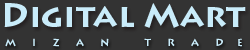
<style>
.page{position:relative;width:250px;height:50px;background:#333333}
.page>*{position:absolute;margin:0}
.t1{font:33px "LithosPro-Bold";color:#c9ecfa}
.t2{font:10px "LithosPro-Bold";color:#c9ecfa}
</style>
<div class="page">
<p class="t1" style="left:4px;top:3px;width:242px;height:25px">Digital Mart</p>
<p class="t2" style="left:5px;top:38px;width:237px;height:9px">M      I      Z      A      N             T      R      A      D     E</p>
</div>
